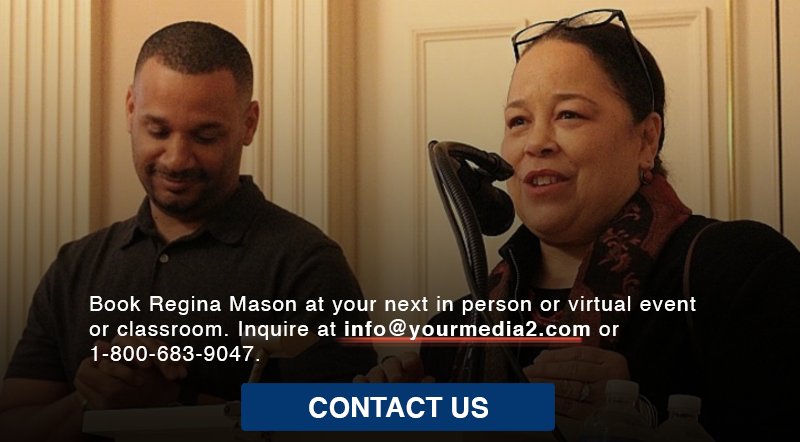
<style>
.page{position:relative;width:800px;height:442px}
.page>*{position:absolute;margin:0}
.t1{font:20.8px "Helvetica";letter-spacing:0.06em;color:#ffffff}
.t2{font:20.8px "Helvetica-Bold";letter-spacing:0.06em;color:#ffffff}
.t3{font:27.9px "Helvetica-Bold";color:#ffffff}
</style>
<div class="page">
<p class="t1" style="left:89px;top:296px;width:607px;height:65px">Book Regina Mason at your next in person or virtual event <br>or classroom. Inquire at <span class="t2">info@yourmedia2.com</span> or <br>1-800-683-9047.</p>
<p class="t3" style="left:309px;top:397px;width:179px;height:21px">CONTACT US</p>
</div>
